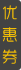
<style>
.page{position:relative;width:21px;height:70px;background:#434343}
.page>*{position:absolute;margin:0}
.t1{font:16px/22px "MFYueYuan_Noncommercial-Regular";color:#f3be05}
</style>
<div class="page">
<p class="t1" style="left:2px;top:5px;width:15px;height:59px">优<br>惠<br>券</p>
</div>
